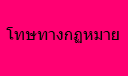
<style>
.page{position:relative;width:128px;height:76px;background:#ff0072}
.page>*{position:absolute;margin:0}
.t1{font:15.6px "Tahoma";color:#000203}
</style>
<div class="page">
<p class="t1" style="left:6px;top:27px;width:113px;height:16px">โทษทางกฏหมาย</p>
</div>
